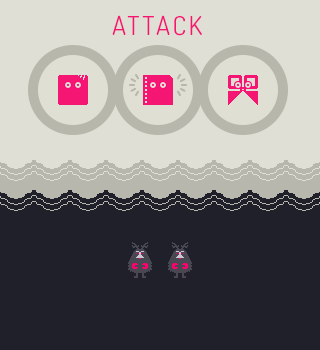
<style>
.page{position:relative;width:320px;height:350px;background:#20202a}
.page>*{position:absolute;margin:0}
.t1{font:26px "Dosis-Regular";letter-spacing:0.1em;color:#f51672;text-transform:uppercase}
</style>
<div class="page">
<p class="t1" style="left:112px;top:15px;width:90px;height:21px">attack</p>
</div>
